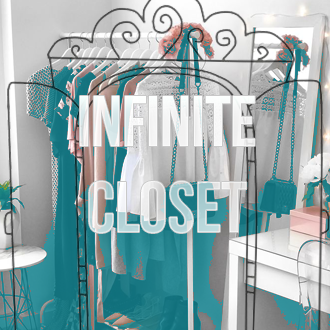
<style>
.page{position:relative;width:330px;height:330px}
.page>*{position:absolute;margin:0}
.t1{font:72px "BebasNeue";color:#fdf1fc}
</style>
<div class="page">
<p class="t1" style="left:80px;top:96px;width:175px;height:137px;text-align:center">Infinite<br>closet</p>
</div>
